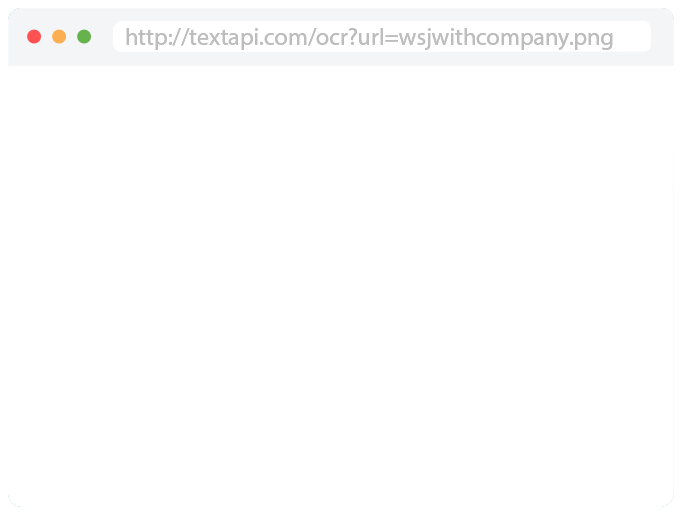
<style>
.page{position:relative;width:682px;height:516px;background:#ffffff}
.page>*{position:absolute;margin:0}
.t1{font:24px "MyriadPro-Regular";color:#bdbdbd}
</style>
<div class="page">
<p class="t1" style="left:126px;top:28px;width:487px;height:22px">http://textapi.com/ocr?url=wsjwithcompany.png</p>
<p class="t1" style="left:126px;top:28px;width:487px;height:22px">http://textapi.com/ocr?url=wsjwithcompany.png</p>
</div>
